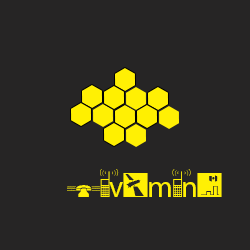
<style>
.page{position:relative;width:250px;height:250px;background:#262525}
.page>*{position:absolute;margin:0}
.t1{font:30px "ESRITelecom";color:#fff004}
.t2{font:30px "MyriadPro-Regular";color:#fff004}
</style>
<div class="page">
<p class="t1" style="left:67px;top:169px;width:155px;height:28px">Hi<span class="t2">v</span>e<span class="t2">m</span>i<span class="t2">n</span>d</p>
</div>
